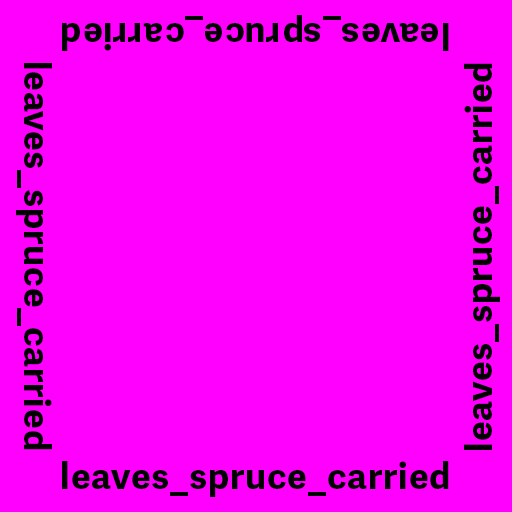
<style>
.page{position:relative;width:512px;height:512px;background:#ff00ff}
.page>*{position:absolute;margin:0}
.t1{font:36px "AdelleSans-Bold";letter-spacing:0.025em;color:#000000}
</style>
<div class="page">
<p class="t1" style="left:62px;top:15px;width:387px;height:36px;rotate:180deg">leaves_spruce_carried</p>
<p class="t1" style="left:16px;top:63px;width:36px;height:387px;rotate:90deg">leaves_spruce_carried</p>
<p class="t1" style="left:464px;top:63px;width:36px;height:387px;rotate:-90deg">leaves_spruce_carried</p>
<p class="t1" style="left:62px;top:461px;width:387px;height:36px">leaves_spruce_carried</p>
</div>
